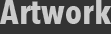
<style>
.page{position:relative;width:111px;height:34px;background:#333333}
.page>*{position:absolute;margin:0}
.t1{font:34.3px "AvenirNextCondensed-Bold";color:#cbcbcb}
</style>
<div class="page">
<p class="t1" style="left:0px;top:0px;width:112px;height:24px">Artwork</p>
</div>
